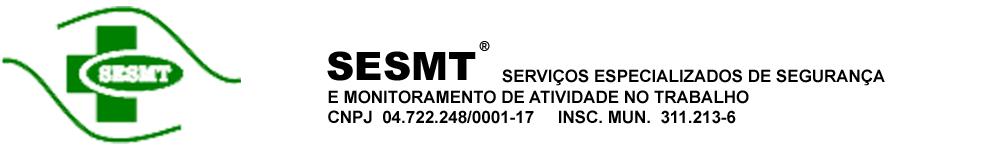
<style>
.page{position:relative;width:1000px;height:150px;background:#ffffff}
.page>*{position:absolute;margin:0}
.t1{font:13.1px "ArialMT";color:#000000}
.t2{font:39.2px "Arial-Black";color:#000000}
.t3{font:17px "Arial-BoldMT";color:#000000}
</style>
<div class="page">
<p class="t1" style="left:479px;top:41px;width:11px;height:10px">®</p>
<p class="t2" style="left:327px;top:51px;width:149px;height:30px">SESMT</p>
<p class="t3" style="left:328px;top:69px;width:557px;height:55px">SERVIÇOS ESPECIALIZADOS DE SEGURANÇA<br>E MONITORAMENTO DE ATIVIDADE NO TRABALHO<br>CNPJ  04.722.248/0001-17     INSC. MUN.  311.213-6</p>
</div>
